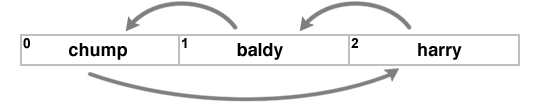
<style>
.page{position:relative;width:540px;height:102px;background:#ffffff}
.page>*{position:absolute;margin:0}
.t1{font:14px "Arial-BoldMT";color:#000000}
.t2{font:18px "Helvetica-Bold";color:#000000}
</style>
<div class="page">
<p class="t1" style="left:23px;top:38px;width:7px;height:11px">0</p>
<p class="t1" style="left:182px;top:38px;width:5px;height:10px">1</p>
<p class="t1" style="left:351px;top:38px;width:7px;height:10px">2</p>
<p class="t2" style="left:69px;top:43px;width:58px;height:17px">chump</p>
<p class="t2" style="left:237px;top:43px;width:46px;height:17px">baldy</p>
<p class="t2" style="left:418px;top:43px;width:44px;height:17px">harry</p>
</div>
